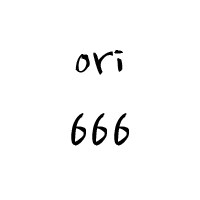
<style>
.page{position:relative;width:200px;height:200px;background:#ffffff}
.page>*{position:absolute;margin:0}
.t1{font:60px/72px "NanumBrush";color:#010000}
</style>
<div class="page">
<p class="t1" style="left:71px;top:50px;width:58px;height:96px;text-align:center">ori<br>666</p>
</div>
